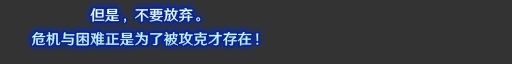
<style>
.page{position:relative;width:512px;height:64px;background:#333333}
.page>*{position:absolute;margin:0}
.t1{font:14.7px/24px "HYWenHei-FEW";letter-spacing:0.005em;color:#c0f3ff}
</style>
<div class="page">
<p class="t1" style="left:31px;top:8px;width:228px;height:38px;text-align:center">但是，不要放弃。<br>危机与困难正是为了被攻克才存在！</p>
</div>
